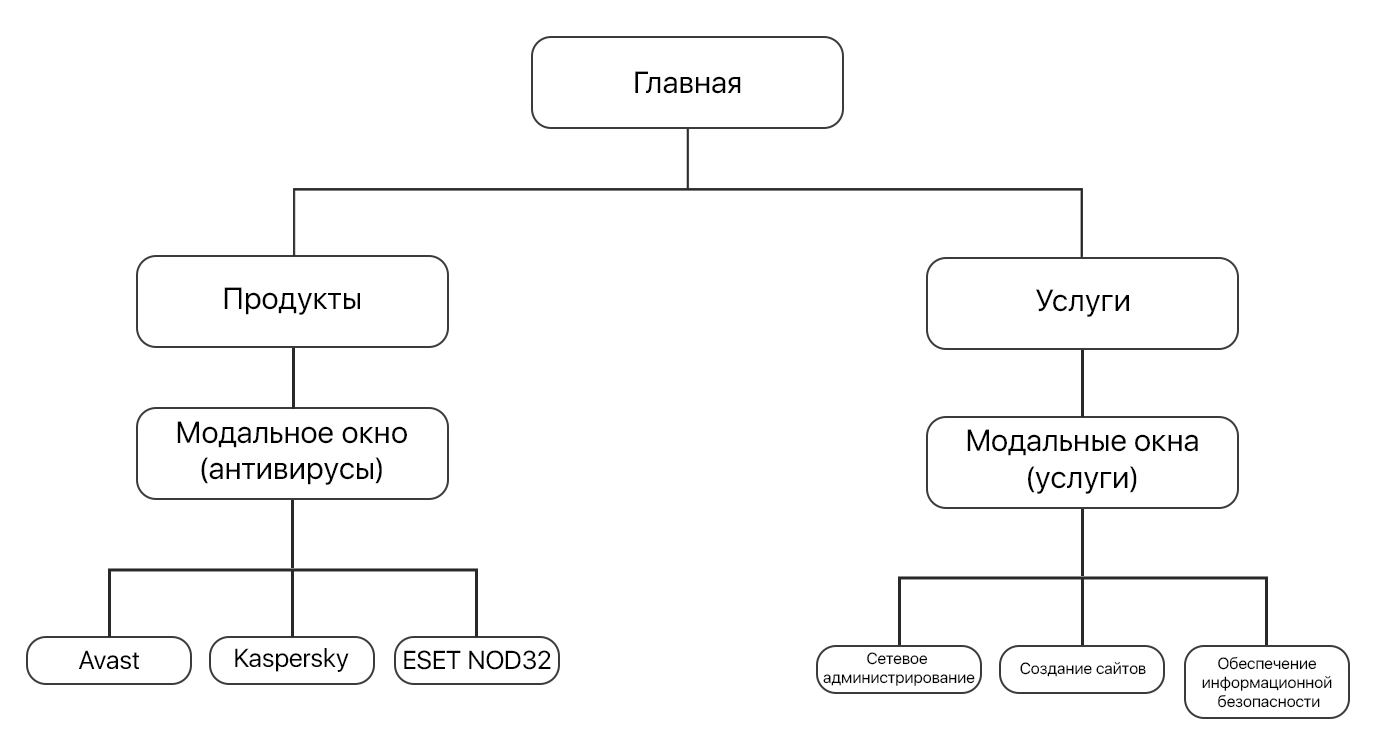
<style>
.page{position:relative;width:1380px;height:754px;background:#ffffff}
.page>*{position:absolute;margin:0}
.t1{font:30.4px "SFUIDisplay-Regular";color:#000000}
.t2{font:25.7px "SFUIDisplay-Regular";color:#000000}
.t3{font:16px "SFUIDisplay-Regular";color:#000000}
</style>
<div class="page">
<p class="t1" style="left:635px;top:71px;width:106px;height:23px">Главная</p>
<p class="t1" style="left:224px;top:287px;width:136px;height:28px">Продукты</p>
<p class="t1" style="left:1036px;top:289px;width:93px;height:28px">Услуги</p>
<p class="t1" style="left:177px;top:421px;width:230px;height:64px;text-align:center">Модальное окно<br>(антивирусы)</p>
<p class="t1" style="left:967px;top:429px;width:231px;height:65px;text-align:center">Модальные окна<br>(услуги)</p>
<p class="t2" style="left:78px;top:650px;width:61px;height:19px">Avast</p>
<p class="t2" style="left:235px;top:648px;width:114px;height:24px">Kaspersky</p>
<p class="t2" style="left:404px;top:650px;width:147px;height:20px">ESET NOD32</p>
<p class="t3" style="left:823px;top:652px;width:152px;height:34px;text-align:center">Сетевое <br>администрирование</p>
<p class="t3" style="left:1020px;top:662px;width:126px;height:15px">Создание сайтов</p>
<p class="t3" style="left:1202px;top:656px;width:130px;height:52px;text-align:center">Обеспечение <br>информационной <br>безопасности</p>
</div>
